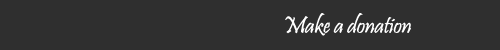
<style>
.page{position:relative;width:500px;height:50px;background:#2f2f2f}
.page>*{position:absolute;margin:0}
.t1{font:24px "Pristina-Regular";letter-spacing:-0.01em;color:#ffffff}
</style>
<div class="page">
<p class="t1" style="left:285px;top:13px;width:126px;height:23px">Make a donation</p>
</div>
